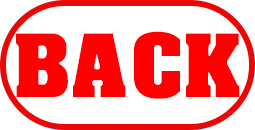
<style>
.page{position:relative;width:255px;height:130px;background:#ffffff}
.page>*{position:absolute;margin:0}
.t1{font:83.3px "AcmeFont";color:#ff0000}
</style>
<div class="page">
<p class="t1" style="left:16px;top:31px;width:224px;height:68px">BACK</p>
</div>
